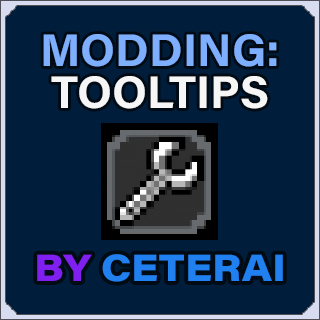
<style>
.page{position:relative;width:320px;height:320px;background:#001e3b}
.page>*{position:absolute;margin:0}
.t1{font:45.8px/41.7px "AcuminConcept-Bold";color:#7eafff}
.t2{font:45.8px/41.7px "AcuminConcept-Bold";color:#f6f6f6}
.t3{font:37.5px "AcuminConcept_760.000wght_112.000wdth";color:#2080f0}
.t4{font:37.5px "AcuminConcept_760.000wght_112.000wdth";color:#8020f0}
</style>
<div class="page">
<p class="t1" style="left:43px;top:34px;width:234px;height:75px;text-align:center">MODDING:<br><span class="t2">TOOLTIPS</span></p>
<p class="t3" style="left:37px;top:254px;width:246px;height:28px"><span class="t4">BY</span> CETERAI</p>
</div>
